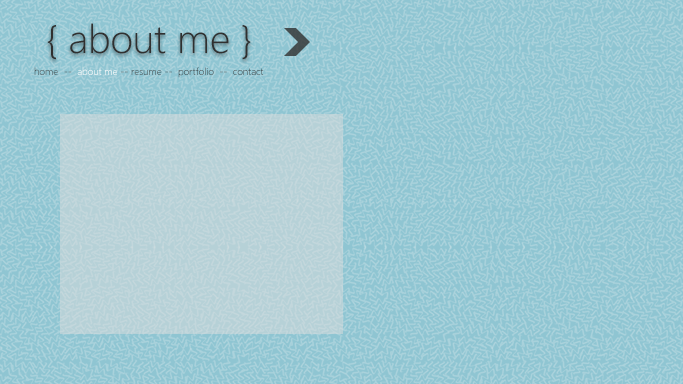
<style>
.page{position:relative;width:683px;height:384px;background:#8fc5d2}
.page>*{position:absolute;margin:0}
.t1{font:40px "SegoeUI-Light";color:#303030}
.t2{font:10px "SegoeUI-Light"}
</style>
<div class="page">
<p class="t1" style="left:47px;top:23px;width:204px;height:37px">{ about me }</p>
<p class="t2" style="left:34px;top:67px;width:230px;height:11px">home  --  about me -- resume --  portfolio  --  contact</p>
</div>
